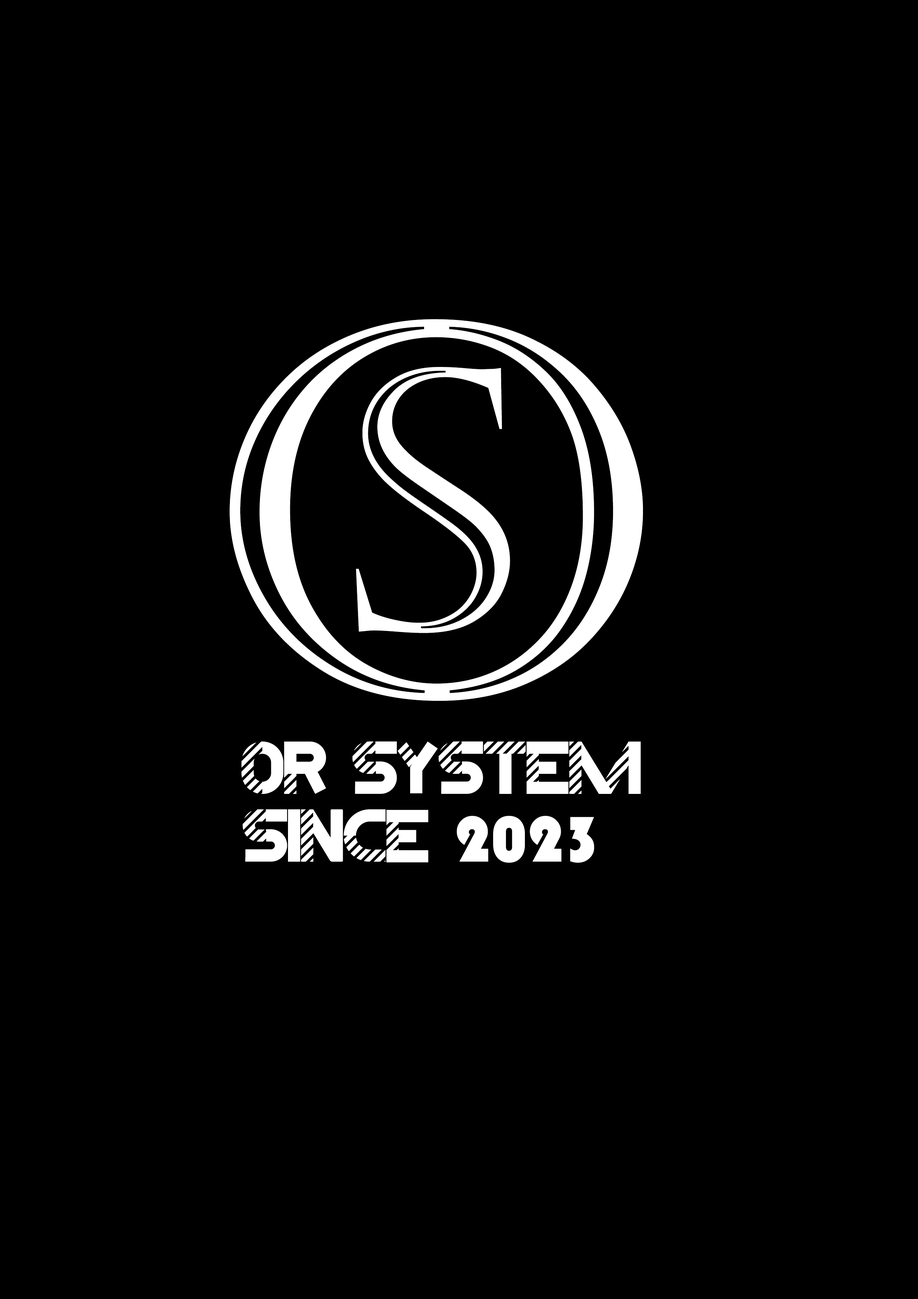
<style>
.page{position:relative;width:918px;height:1299px;background:#000000}
.page>*{position:absolute;margin:0}
.t1{font:522.4px "Castellar";letter-spacing:-0.02em;color:#ffffff}
.t2{font:364.7px "Castellar";letter-spacing:-0.02em;color:#ffffff}
.t3{font:66.7px "DragonSnakeDemoRegular";letter-spacing:-0.02em;color:#ffffff}
.t4{font:66.7px "Bauhaus93";letter-spacing:-0.02em;color:#ffffff}
</style>
<div class="page">
<p class="t1" style="left:230px;top:319px;width:413px;height:382px">o</p>
<p class="t2" style="left:356px;top:367px;width:154px;height:266px">s</p>
<p class="t3" style="left:241px;top:741px;width:400px;height:53px">OR SYSTEM</p>
<p class="t3" style="left:242px;top:809px;width:352px;height:54px">since <span class="t4">2023</span></p>
</div>
